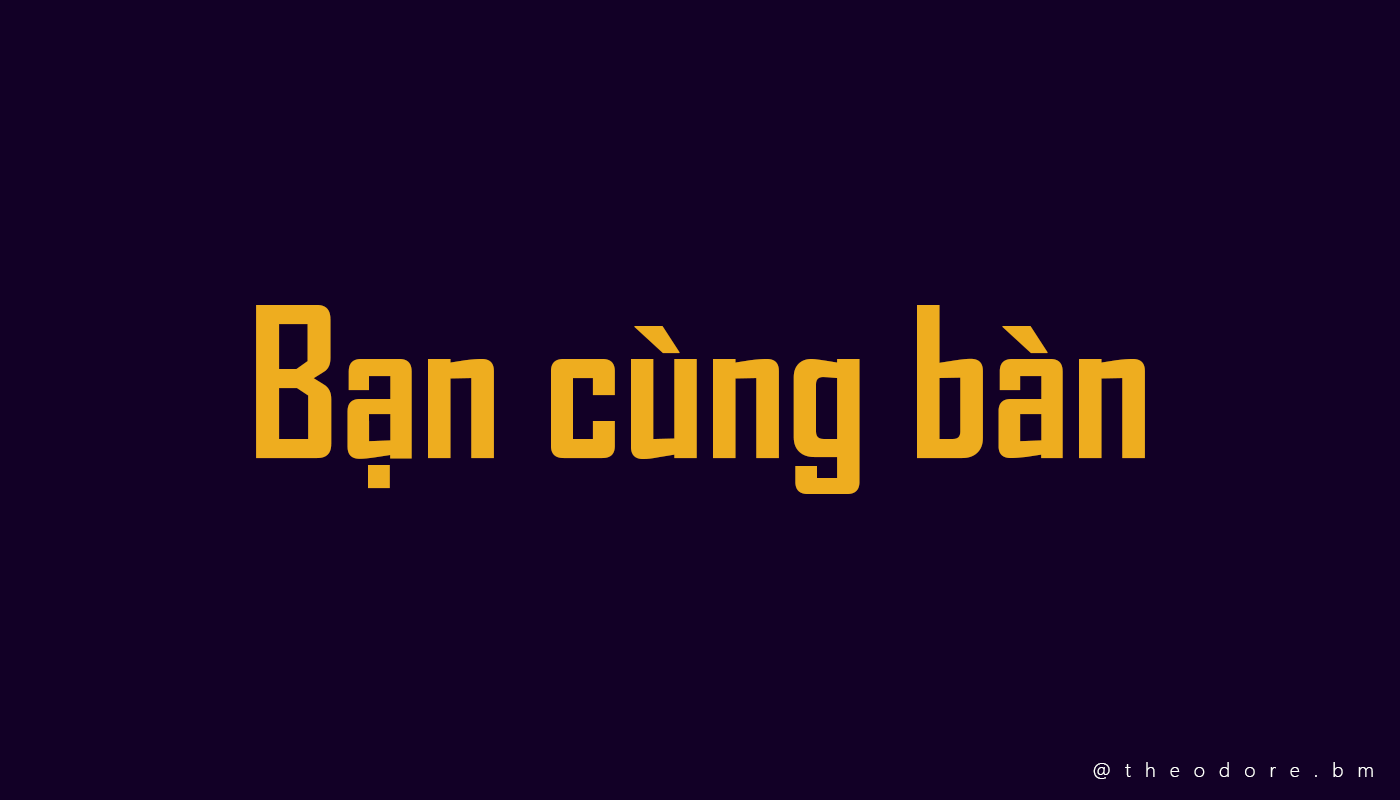
<style>
.page{position:relative;width:1400px;height:800px;background:#120026}
.page>*{position:absolute;margin:0}
.t1{font:200px "SVN-AgencyFBbold";color:#eead1f}
.t2{font:20px "SegoeUI-Light";letter-spacing:0.7em;color:#ffffff}
</style>
<div class="page">
<p class="t1" style="left:256px;top:305px;width:889px;height:189px">Bạn cùng bàn</p>
<p class="t2" style="left:1093px;top:762px;width:280px;height:17px">@theodore.bm</p>
</div>
